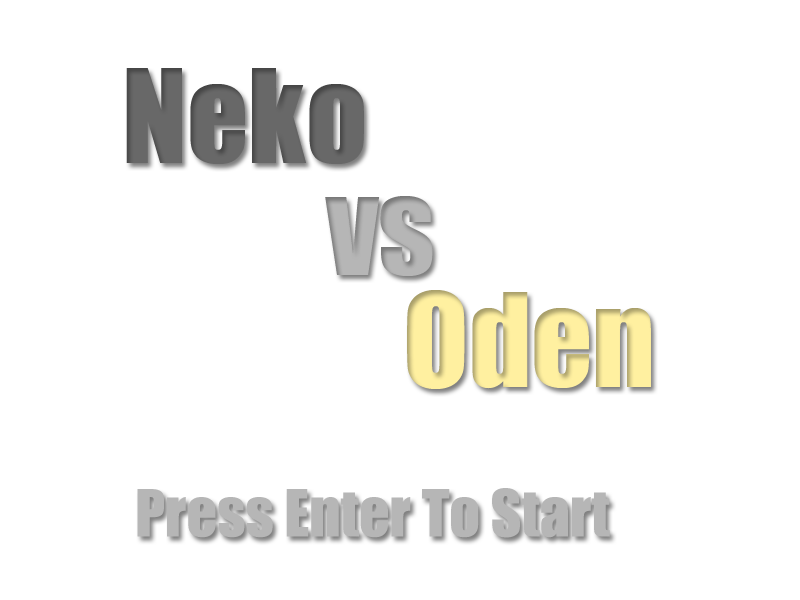
<style>
.page{position:relative;width:800px;height:600px;background:#ffffff}
.page>*{position:absolute;margin:0}
.t1{font:120px "Impact";color:#686868}
.t2{font:120px "Impact";color:#b6b6b6}
.t3{font:120px "Impact";color:#fff0a0}
.t4{font:60px "Impact";color:#b6b6b6}
</style>
<div class="page">
<p class="t1" style="left:126px;top:68px;width:238px;height:96px">Neko</p>
<p class="t2" style="left:325px;top:196px;width:108px;height:80px">vs</p>
<p class="t3" style="left:407px;top:290px;width:244px;height:99px">Oden</p>
<p class="t4" style="left:137px;top:488px;width:473px;height:50px">Press Enter To Start</p>
</div>
